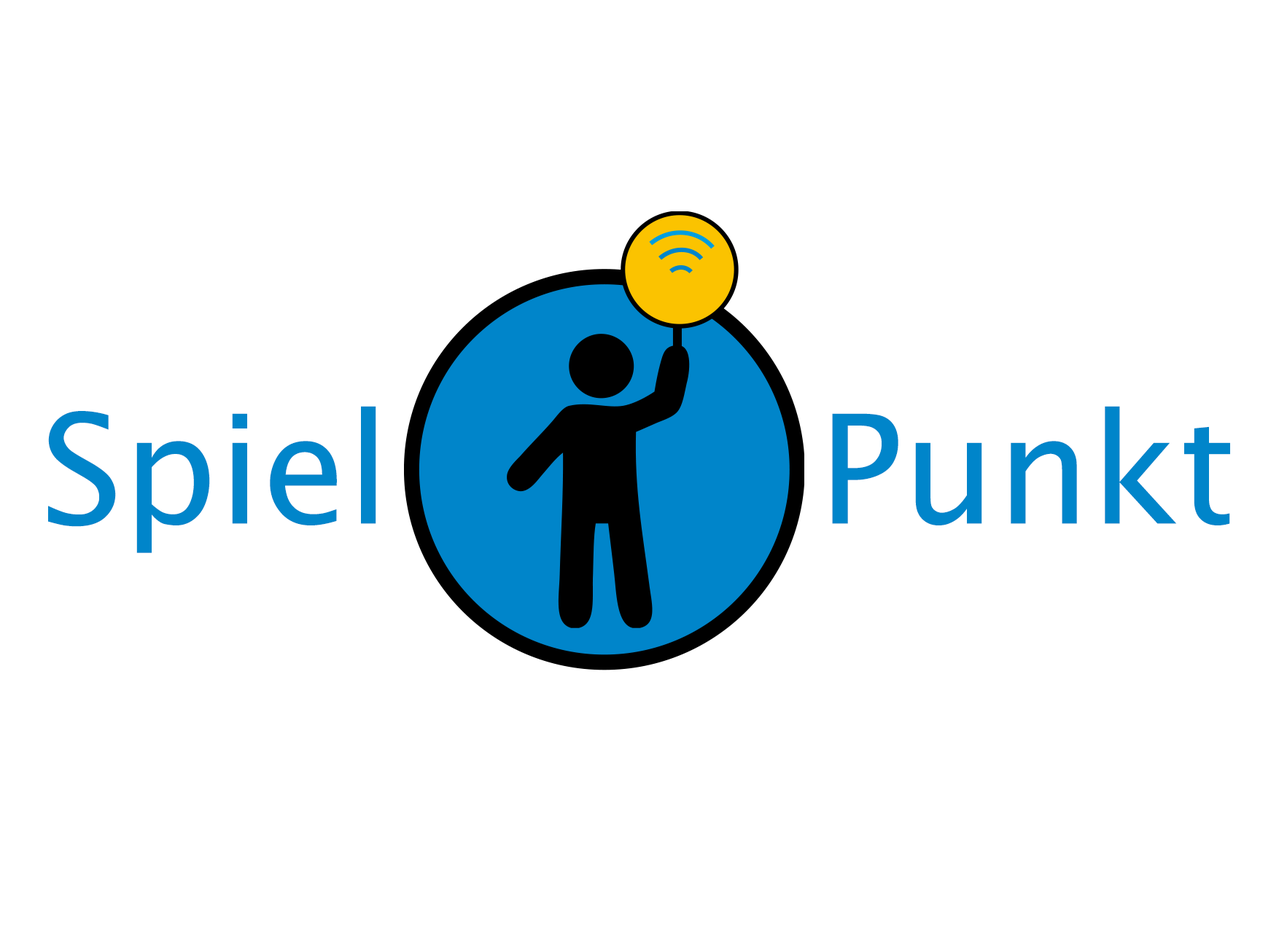
<style>
.page{position:relative;width:1279px;height:932px;background:#ffffff}
.page>*{position:absolute;margin:0}
.t1{font:151.9px "LucidaSans";color:#0085ca}
</style>
<div class="page">
<p class="t1" style="left:48px;top:406px;width:328px;height:147px">Spiel</p>
<p class="t1" style="left:832px;top:406px;width:398px;height:120px">Punkt</p>
</div>
